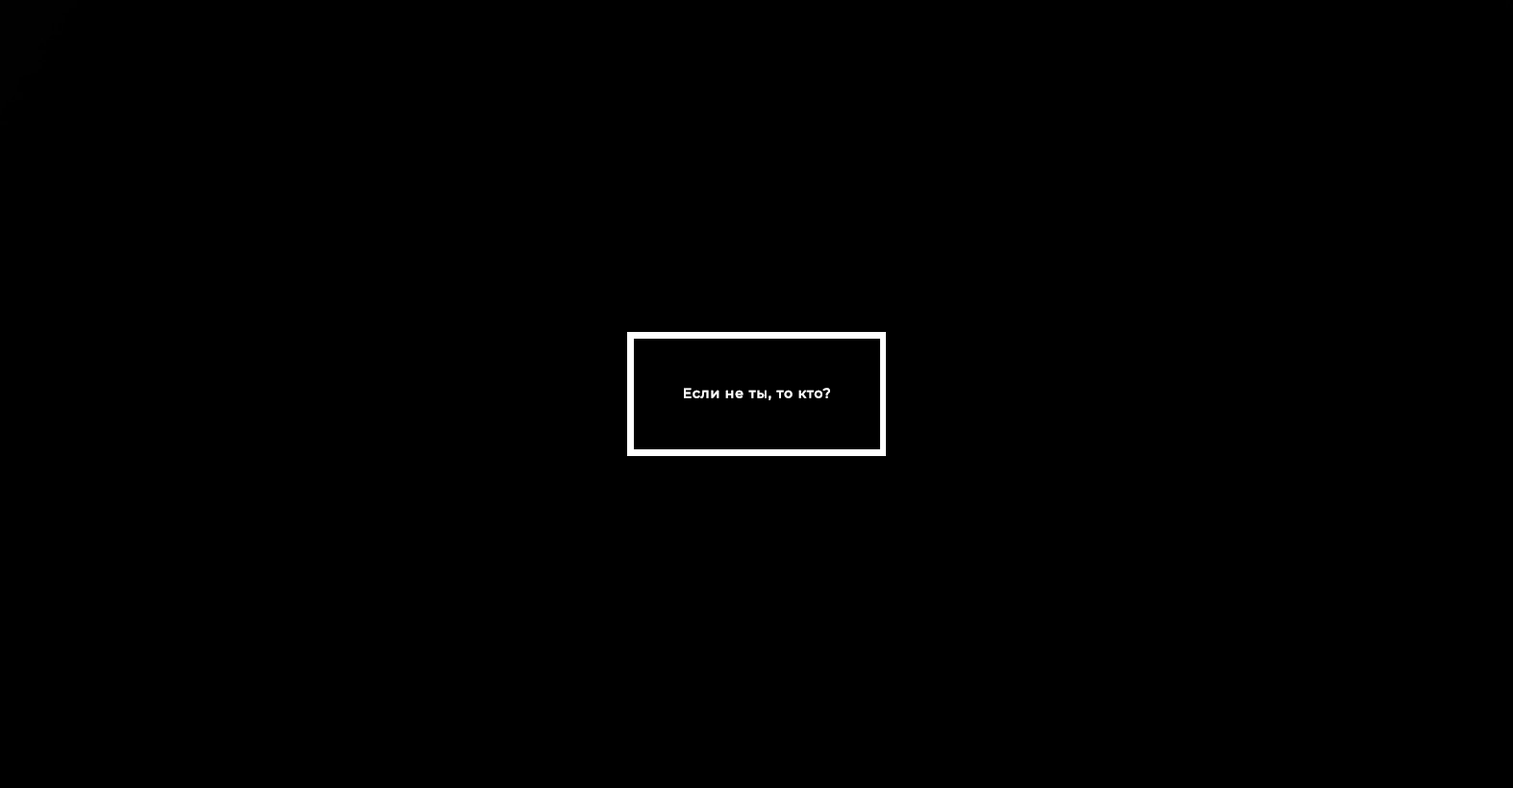
<style>
.page{position:relative;width:1513px;height:788px;background:#000000}
.page>*{position:absolute;margin:0}
.t1{font:13.5px "Montserrat-Medium";letter-spacing:0.04em;color:#ffffff;font-weight:bold}
</style>
<div class="page">
<p class="t1" style="left:684px;top:388px;width:146px;height:12px">Если не ты, то кто?</p>
</div>
